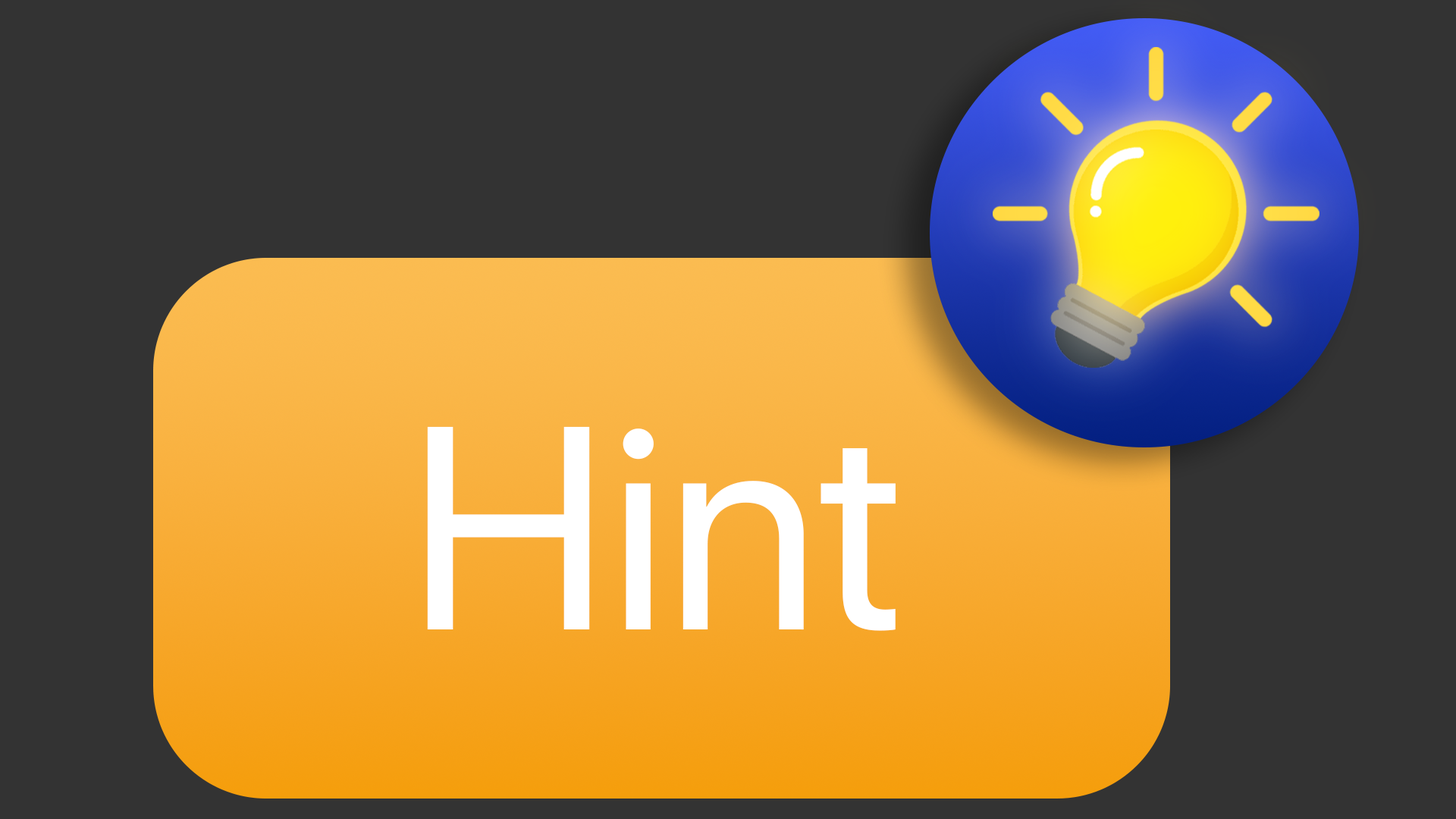
<style>
.page{position:relative;width:1456px;height:819px;background:#333333}
.page>*{position:absolute;margin:0}
.t1{font:287.4px "SFProDisplay-Regular";color:#ffffff}
</style>
<div class="page">
<p class="t1" style="left:427px;top:426px;width:469px;height:205px">Hint</p>
</div>
